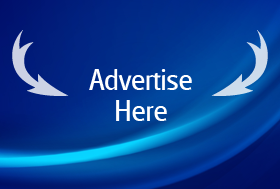
<style>
.page{position:relative;width:280px;height:189px}
.page>*{position:absolute;margin:0}
.t1{font:29.2px/30.6px "Glasgow-Regular";color:#ffffff}
</style>
<div class="page">
<p class="t1" style="left:89px;top:69px;width:103px;height:52px;text-align:center">Advertise<br>Here</p>
</div>
